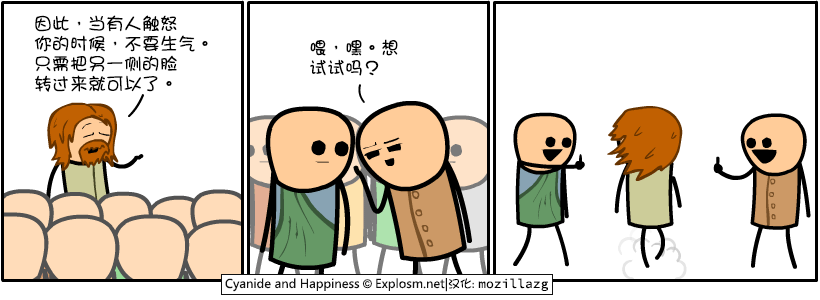
<style>
.page{position:relative;width:820px;height:300px;background:#ffffff}
.page>*{position:absolute;margin:0}
.t1{font:18px/20px "DFGirl";color:#000000}
</style>
<div class="page">
<p class="t1" style="left:34px;top:15px;width:174px;height:77px">因此，当有人触怒<br>你的时候，不要生气。<br>只需把另一侧的脸<br>转过来就可以了。</p>
<p class="t1" style="left:310px;top:39px;width:88px;height:37px">喂，嘿。想<br>试试吗？</p>
</div>
